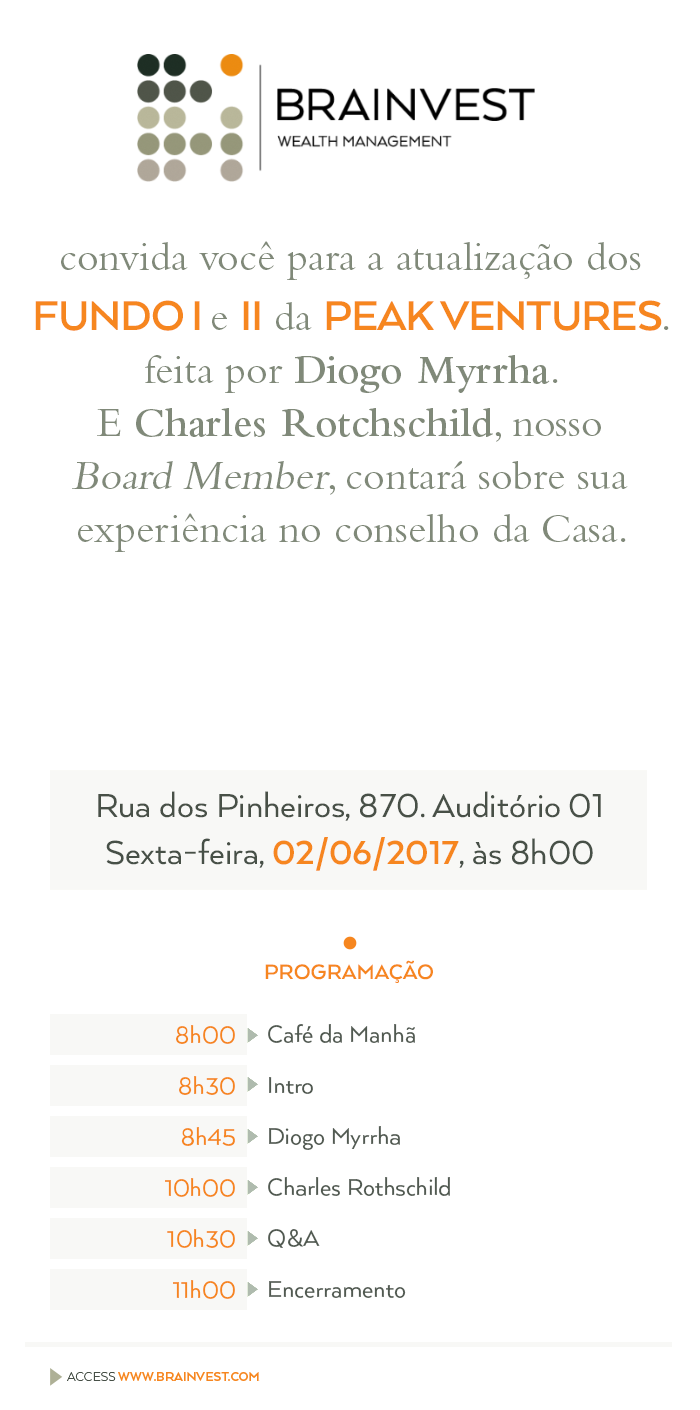
<style>
.page{position:relative;width:700px;height:1410px;background:#ffffff}
.page>*{position:absolute;margin:0}
.t1{font:42px/53px "BemboStd";color:#808979}
.t2{font:48px/60px "ArquitectaBold";letter-spacing:-0.025em;color:#f6861f;text-transform:uppercase}
.t3{font:42px/53px "BemboStd-Semibold";color:#808979}
.t4{font:42px/53px "BemboStd";color:#808979;font-style:italic}
.t5{font:38.2px "Arquitecta";color:#485047}
.t6{font:38.2px "Arquitecta";color:#475047}
.t7{font:38.2px "ArquitectaBold";color:#f6861f}
.t8{font:24px "ArquitectaBold";color:#f6861f;text-transform:uppercase}
.t9{font:27px/51px "Arquitecta";color:#f6861f}
.t10{font:27px/51px "Arquitecta";color:#515a51}
</style>
<div class="page">
<p class="t1" style="left:35px;top:241px;width:634px;height:311px;text-align:center">convida você para a atualização dos <br><span class="t2">Fundo I </span>e <span class="t2">II</span> da <span class="t2">peak ventures</span>. <br>feita por <span class="t3">Diogo Myrrha</span>. <br>E <span class="t3">Charles Rotchschild</span>, nosso <br><span class="t4">Board Member</span>, contará sobre sua experiência no conselho da Casa.</p>
<p class="t5" style="left:98px;top:791px;width:503px;height:30px">Rua dos Pinheiros, 870. Auditório 01</p>
<p class="t6" style="left:106px;top:837px;width:487px;height:34px">Sexta-feira, <span class="t7">02/06/2017</span>, às 8h00</p>
<p class="t8" style="left:265px;top:960px;width:168px;height:23px">Programação</p>
<p class="t9" style="left:165px;top:1025px;width:70px;height:274px;text-align:right">8h00<br>8h30<br>8h45<br>10h00<br>10h30<br>11h00</p>
<p class="t10" style="left:268px;top:1024px;width:182px;height:274px">Café da Manhã<br>Intro<br>Diogo Myrrha<br>Charles Rothschild<br>Q&amp;A<br>Encerramento</p>
</div>
